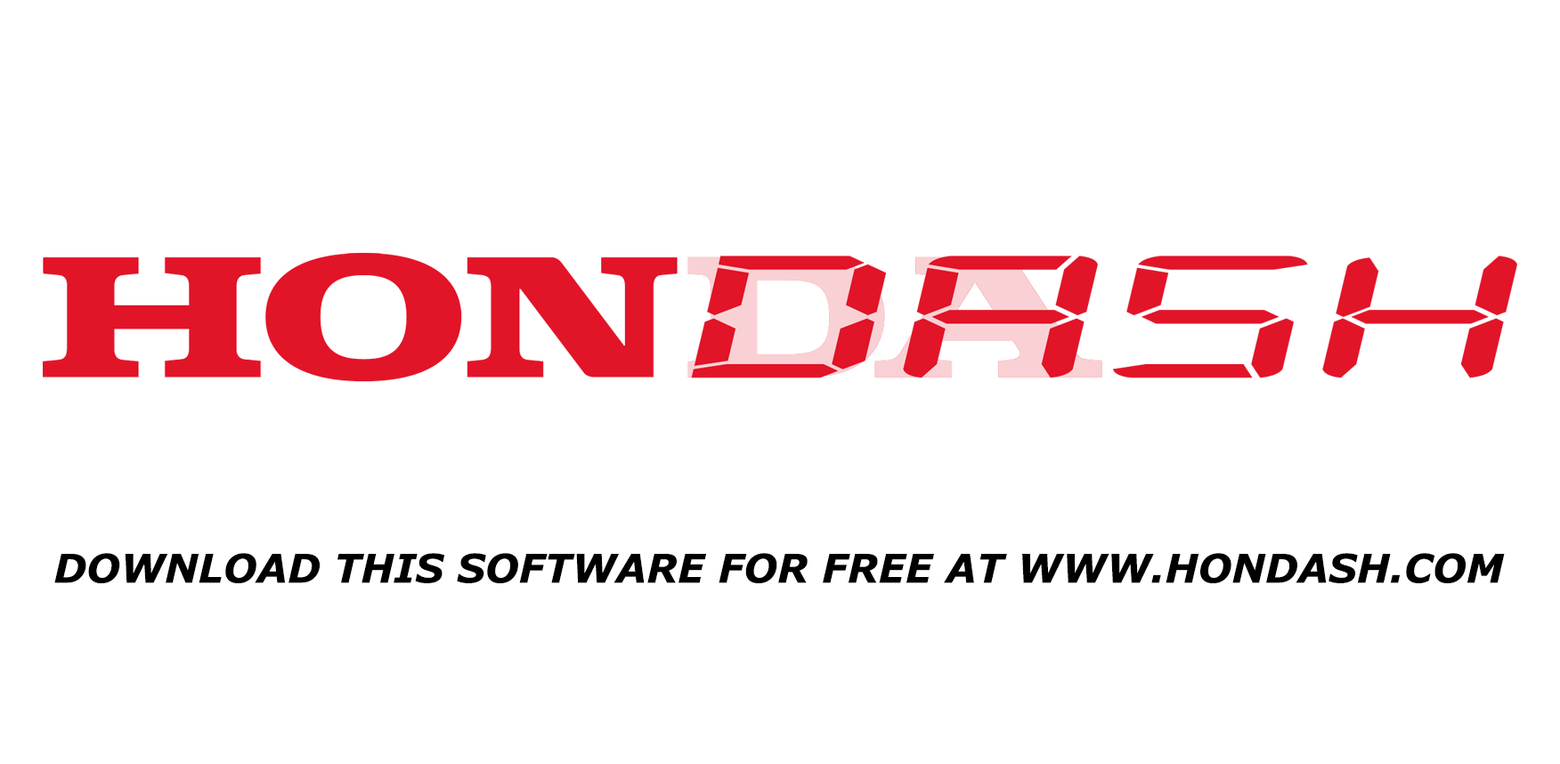
<style>
.page{position:relative;width:1560px;height:764px;background:#ffffff}
.page>*{position:absolute;margin:0}
.t1{font:39.5px "Verdana-BoldItalic";color:#000000}
</style>
<div class="page">
<p class="t1" style="left:54px;top:553px;width:1451px;height:30px">DOWNLOAD THIS SOFTWARE FOR FREE AT WWW.HONDASH.COM</p>
</div>
